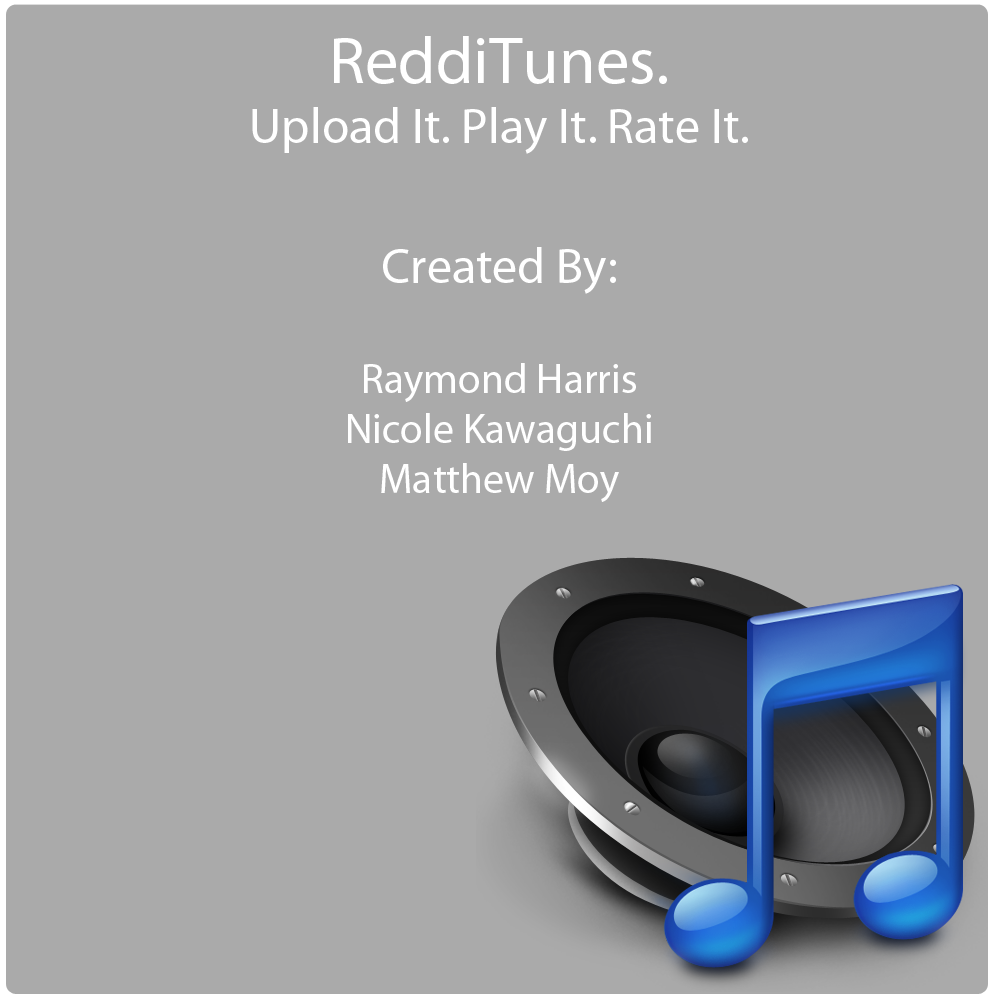
<style>
.page{position:relative;width:1000px;height:1000px;background:#aaaaaa}
.page>*{position:absolute;margin:0}
.t1{font:41.7px "MyriadPro-Regular";color:#ffffff}
.t2{font:66.7px "MyriadPro-Regular";color:#ffffff}
.t3{font:50px "MyriadPro-Regular";color:#ffffff}
</style>
<div class="page">
<p class="t1" style="left:252px;top:36px;width:496px;height:466px;text-align:center"><span class="t2">ReddiTunes. <br></span><span class="t3">Upload It. Play It. Rate It.<br><br>Created By:<br><br></span>Raymond Harris<br>Nicole Kawaguchi<br>Matthew Moy</p>
</div>
